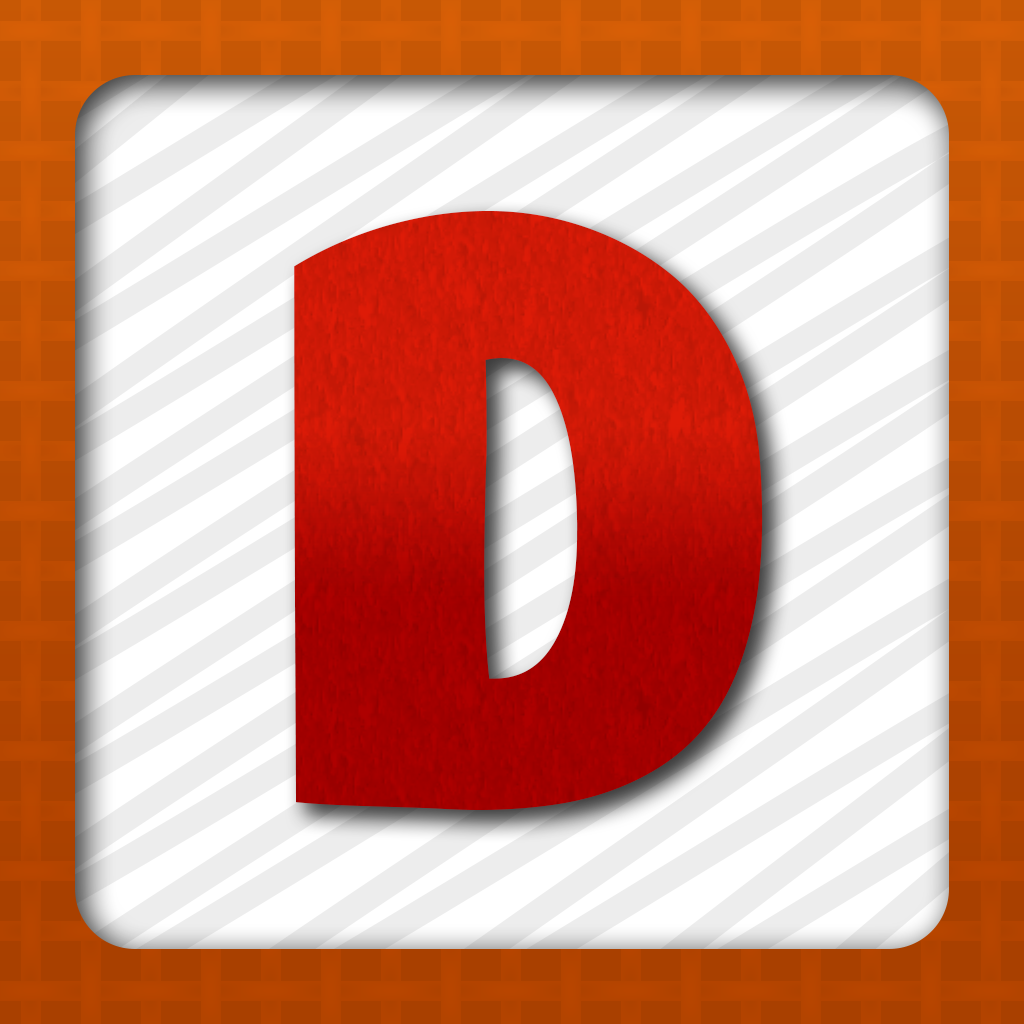
<style>
.page{position:relative;width:1024px;height:1024px}
.page>*{position:absolute;margin:0}
.t1{font:933.3px "Boomboom"}
</style>
<div class="page">
<p class="t1" style="left:294px;top:211px;width:469px;height:599px">D</p>
</div>
